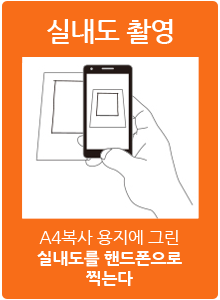
<style>
.page{position:relative;width:220px;height:300px;background:#f86d18}
.page>*{position:absolute;margin:0}
.t1{font:26.7px "NanumGothicBold";letter-spacing:-0.025em;color:#ffffff;text-transform:uppercase}
.t2{font:17.1px "NanumGothicExtraBold";letter-spacing:-0.025em;color:#ffffff;text-transform:uppercase}
.t3{font:17.1px "NanumGothic";letter-spacing:-0.025em;color:#ffffff;text-transform:uppercase}
</style>
<div class="page">
<p class="t1" style="left:47px;top:19px;width:126px;height:25px">실내도 촬영</p>
<p class="t2" style="left:37px;top:230px;width:145px;height:56px;text-align:center"><span class="t3">A4복사 용지에 그린<br></span>실내도를 핸드폰으로<br>찍는다</p>
</div>
